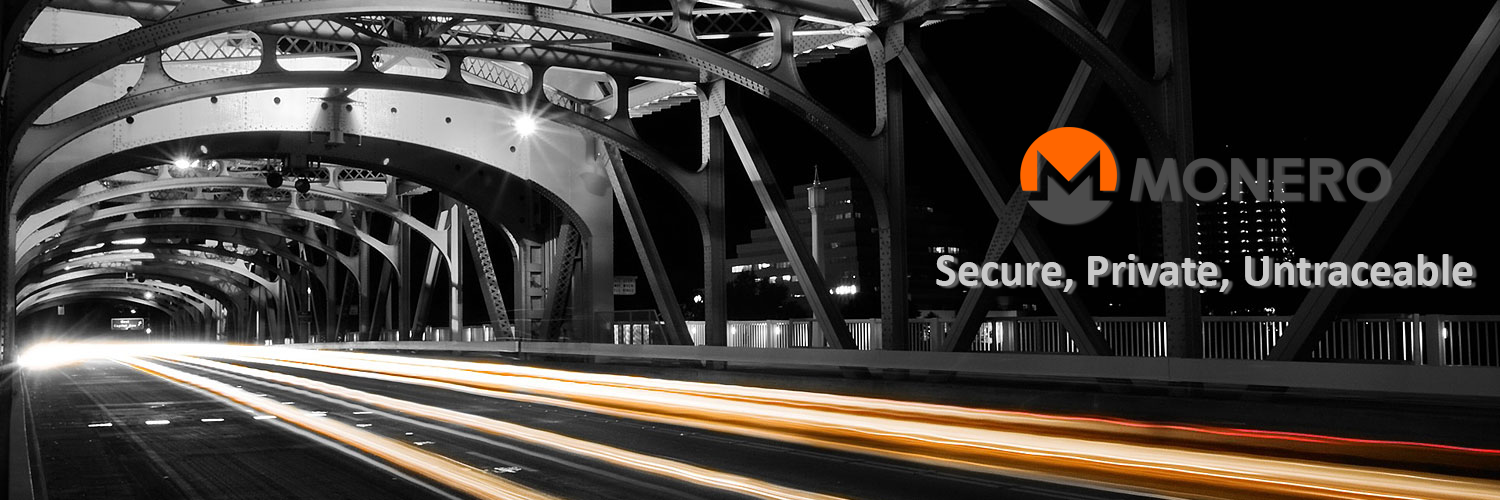
<style>
.page{position:relative;width:1500px;height:500px}
.page>*{position:absolute;margin:0}
.t1{font:46px "Calibri-Bold";color:#c9c9c9}
</style>
<div class="page">
<p class="t1" style="left:936px;top:254px;width:537px;height:38px">Secure, Private, Untraceable</p>
</div>
